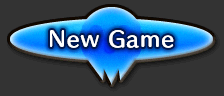
<style>
.page{position:relative;width:224px;height:96px;background:#333333}
.page>*{position:absolute;margin:0}
.t1{font:20px "HummingStd-B";letter-spacing:0.05em;color:#ffffff}
</style>
<div class="page">
<p class="t1" style="left:50px;top:30px;width:124px;height:18px">New Game</p>
</div>
